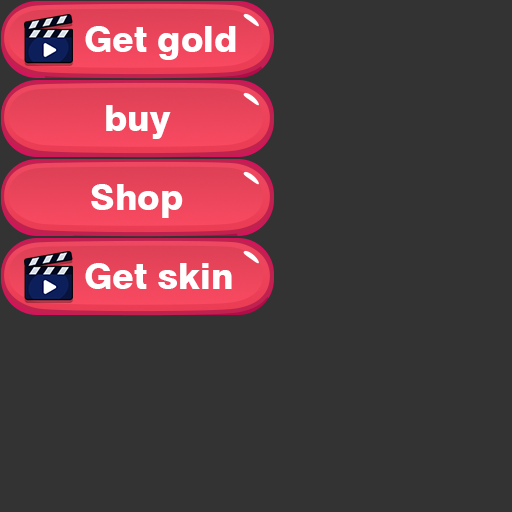
<style>
.page{position:relative;width:512px;height:512px;background:#333333}
.page>*{position:absolute;margin:0}
.t1{font:36px "Swiss721BT-Heavy";color:#ffffff}
</style>
<div class="page">
<p class="t1" style="left:85px;top:26px;width:151px;height:34px">Get gold</p>
<p class="t1" style="left:106px;top:105px;width:65px;height:34px">buy</p>
<p class="t1" style="left:91px;top:184px;width:92px;height:34px">Shop</p>
<p class="t1" style="left:85px;top:263px;width:147px;height:26px">Get skin</p>
</div>
